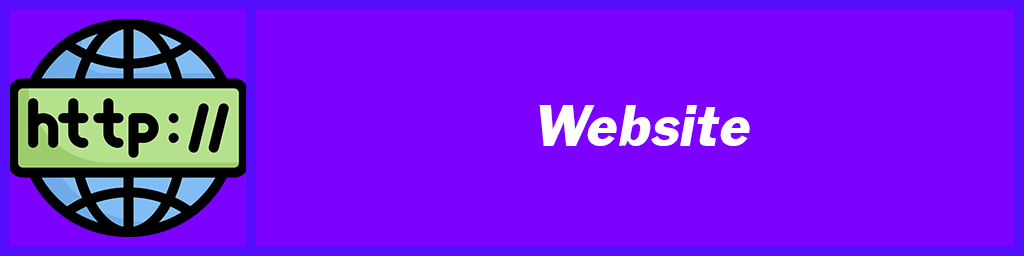
<style>
.page{position:relative;width:1024px;height:256px;background:#7d01ff}
.page>*{position:absolute;margin:0}
.t1{font:61.1px "FranklinGothicITALIC";color:#ffffff}
</style>
<div class="page">
<p class="t1" style="left:539px;top:105px;width:211px;height:41px">Website</p>
</div>
